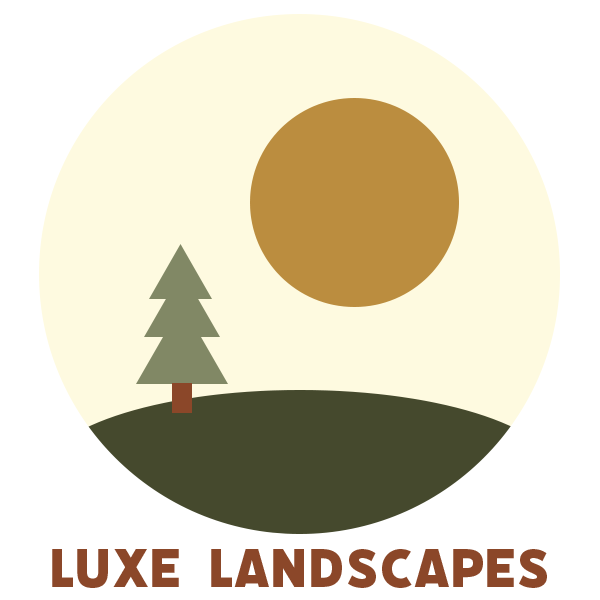
<style>
.page{position:relative;width:600px;height:600px;background:#ffffff}
.page>*{position:absolute;margin:0}
.t1{font:60.1px "Filicudi-Solid";color:#8b4729}
</style>
<div class="page">
<p class="t1" style="left:52px;top:549px;width:495px;height:39px">Luxe  Landscapes</p>
</div>
